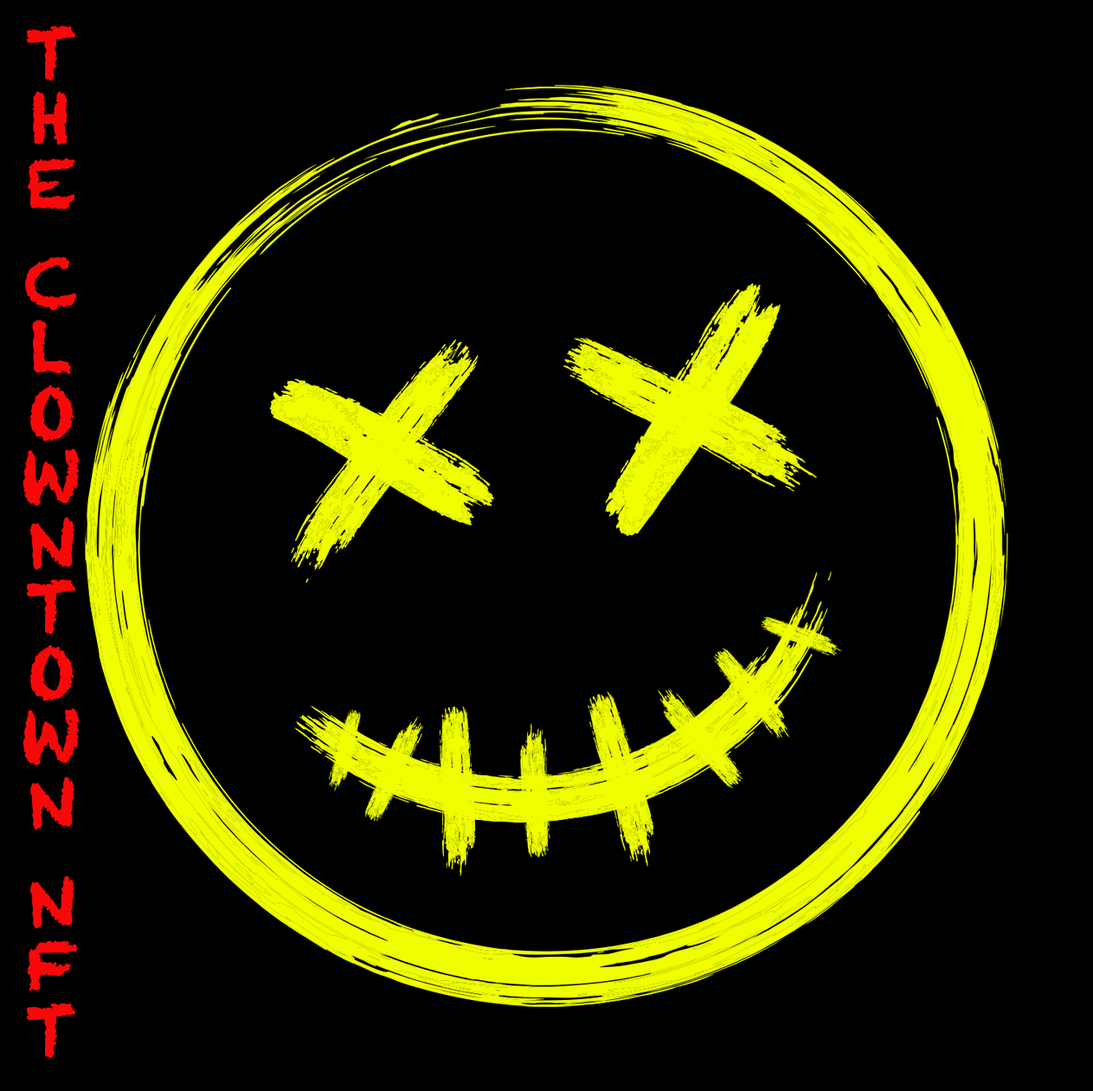
<style>
.page{position:relative;width:1093px;height:1091px;background:#000000}
.page>*{position:absolute;margin:0}
.t1{font:64.9px "Chalkduster";color:#f70909;font-weight:bold}
</style>
<div class="page">
<p class="t1" style="left:23px;top:25px;width:56px;height:1033px">THE CLOWNTOWN NFT</p>
</div>
